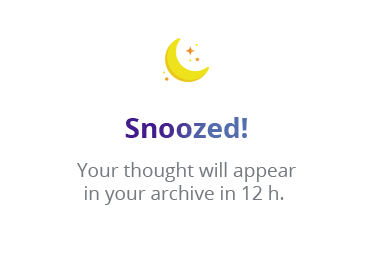
<style>
.page{position:relative;width:375px;height:255px;background:#ffffff}
.page>*{position:absolute;margin:0}
.t1{font:27.9px "OpenSans-Bold"}
.t2{font:19.1px/22.9px "OpenSans";color:#757a80}
</style>
<div class="page">
<p class="t1" style="left:125px;top:117px;width:122px;height:21px">Snoozed!</p>
<p class="t2" style="left:77px;top:162px;width:219px;height:43px;text-align:center">Your thought will appear<br>in your archive in 12 h.</p>
</div>
